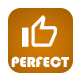
<style>
.page{position:relative;width:80px;height:80px;background:#ffffff}
.page>*{position:absolute;margin:0}
.t1{font:15px "Bauhaus93";color:#ffffff}
</style>
<div class="page">
<p class="t1" style="left:11px;top:56px;width:58px;height:12px">PERFECT</p>
</div>
